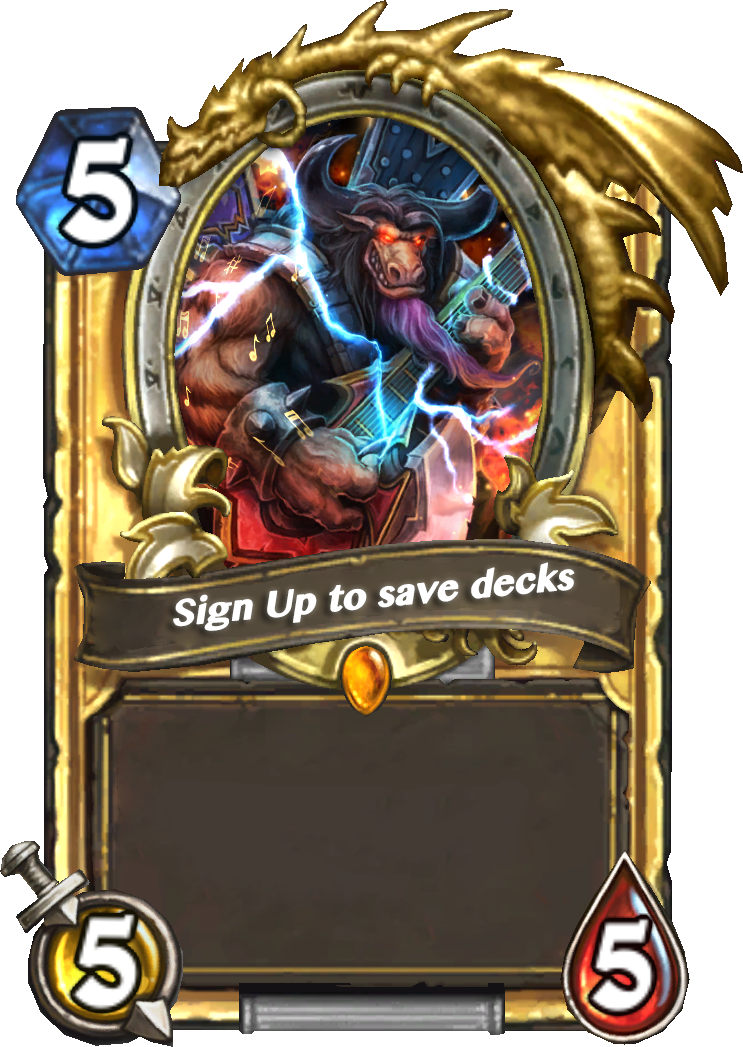
<style>
.page{position:relative;width:743px;height:1047px;background:#ffffff}
.page>*{position:absolute;margin:0}
.t1{font:41.1px "KannadaMN-Bold";letter-spacing:-0.025em;color:#ffffff;font-weight:bold}
</style>
<div class="page">
<p class="t1" style="left:173px;top:562px;width:402px;height:69px;rotate:-5deg">Sign Up to save decks</p>
</div>
